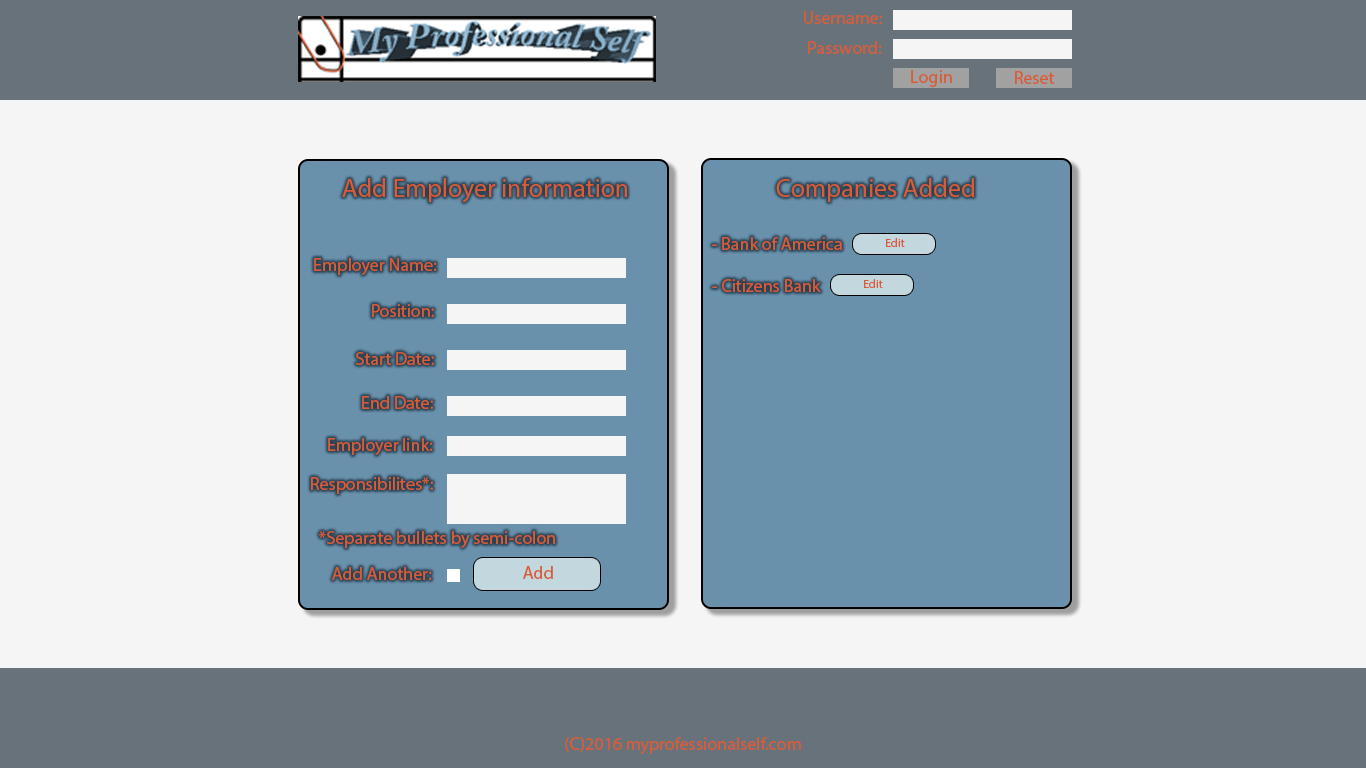
<style>
.page{position:relative;width:1366px;height:768px;background:#f5f5f5}
.page>*{position:absolute;margin:0}
.t1{font:18px "MyriadPro-Regular";color:#d75c37}
.t2{font:26px "MyriadPro-Regular";color:#d75c37}
.t3{font:11.7px "MyriadPro-Regular";color:#d75c37}
</style>
<div class="page">
<p class="t1" style="left:804px;top:11px;width:78px;height:13px">Username:</p>
<p class="t1" style="left:808px;top:41px;width:74px;height:13px">Password:</p>
<p class="t1" style="left:911px;top:70px;width:41px;height:17px">Login</p>
<p class="t1" style="left:1015px;top:71px;width:40px;height:13px">Reset</p>
<p class="t2" style="left:342px;top:178px;width:285px;height:25px">Add Employer information</p>
<p class="t2" style="left:776px;top:178px;width:198px;height:24px">Companies Added</p>
<p class="t1" style="left:712px;top:237px;width:130px;height:13px">- Bank of America</p>
<p class="t3" style="left:886px;top:238px;width:19px;height:9px">Edit</p>
<p class="t1" style="left:314px;top:258px;width:123px;height:17px">Employer Name:</p>
<p class="t1" style="left:712px;top:279px;width:109px;height:13px">- Citizens Bank</p>
<p class="t3" style="left:864px;top:279px;width:19px;height:9px">Edit</p>
<p class="t1" style="left:372px;top:304px;width:62px;height:13px">Position:</p>
<p class="t1" style="left:356px;top:352px;width:78px;height:13px;text-align:center">Start Date:<br>StartSt:</p>
<p class="t1" style="left:362px;top:396px;width:71px;height:13px">End Date:</p>
<p class="t1" style="left:328px;top:438px;width:105px;height:17px">Employer link:</p>
<p class="t1" style="left:311px;top:477px;width:122px;height:17px">Responsibilites*:</p>
<p class="t1" style="left:319px;top:531px;width:236px;height:17px">*Separate bullets by semi-colon</p>
<p class="t1" style="left:332px;top:567px;width:100px;height:13px">Add Another:</p>
<p class="t1" style="left:523px;top:566px;width:30px;height:13px">Add</p>
<p class="t1" style="left:565px;top:737px;width:236px;height:17px">(C)2016 myprofessionalself.com</p>
</div>
